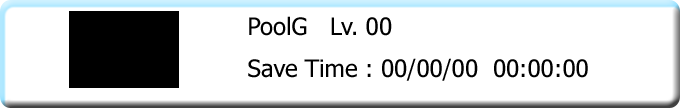
<style>
.page{position:relative;width:680px;height:108px;background:#ffffff}
.page>*{position:absolute;margin:0}
.t1{font:24px "Tahoma";color:#000000}
</style>
<div class="page">
<p class="t1" style="left:248px;top:16px;width:340px;height:65px">PoolG   Lv. 00<br>                                 Save Time : 00/00/00  00:00:00</p>
</div>
